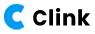
<style>
.page{position:relative;width:95px;height:34px;background:#ffffff}
.page>*{position:absolute;margin:0}
.t1{font:21.8px "Poppins-Bold";letter-spacing:0.03em;color:#000000}
.t2{font:21.8px "Poppins-Bold";letter-spacing:0.03em;color:#000000;scale:0.89 1}
</style>
<div class="page">
<p class="t1" style="left:33px;top:8px;width:58px;height:18px"><span class="t2">C</span>link</p>
</div>
